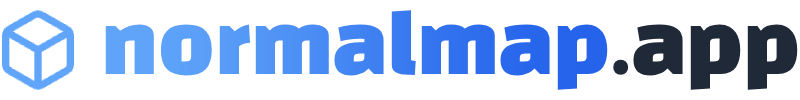
<style>
.page{position:relative;width:800px;height:100px;background:#ffffff}
.page>*{position:absolute;margin:0}
.t1{font:80px "BlackHanSans-Regular"}
</style>
<div class="page">
<p class="t1" style="left:105px;top:10px;width:693px;height:80px">normalmap.app</p>
</div>
